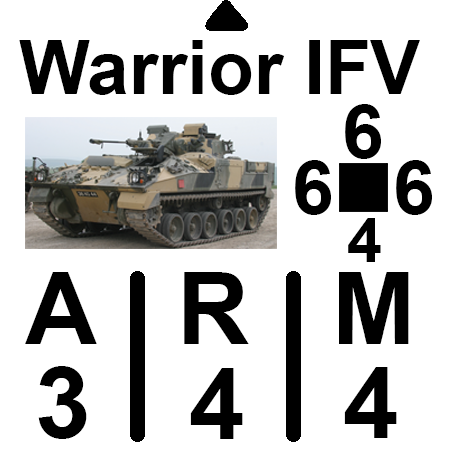
<style>
.page{position:relative;width:450px;height:450px;background:#ffffff}
.page>*{position:absolute;margin:0}
.t1{font:75px "Arial-BoldMT";color:#000000}
.t2{font:62.5px "Arial-BoldMT";color:#000000}
.t3{font:100px "Arial-BoldMT";color:#000000}
</style>
<div class="page">
<p class="t1" style="left:19px;top:40px;width:401px;height:55px">Warrior IFV</p>
<p class="t1" style="left:345px;top:104px;width:36px;height:55px">6</p>
<p class="t1" style="left:295px;top:160px;width:36px;height:55px">6</p>
<p class="t1" style="left:396px;top:160px;width:36px;height:55px">6</p>
<p class="t2" style="left:348px;top:218px;width:33px;height:44px">4</p>
<p class="t3" style="left:25px;top:272px;width:384px;height:72px">A   R   M</p>
<p class="t3" style="left:38px;top:366px;width:49px;height:73px">3</p>
<p class="t3" style="left:190px;top:368px;width:53px;height:71px">4</p>
<p class="t3" style="left:344px;top:367px;width:53px;height:71px">4</p>
</div>
